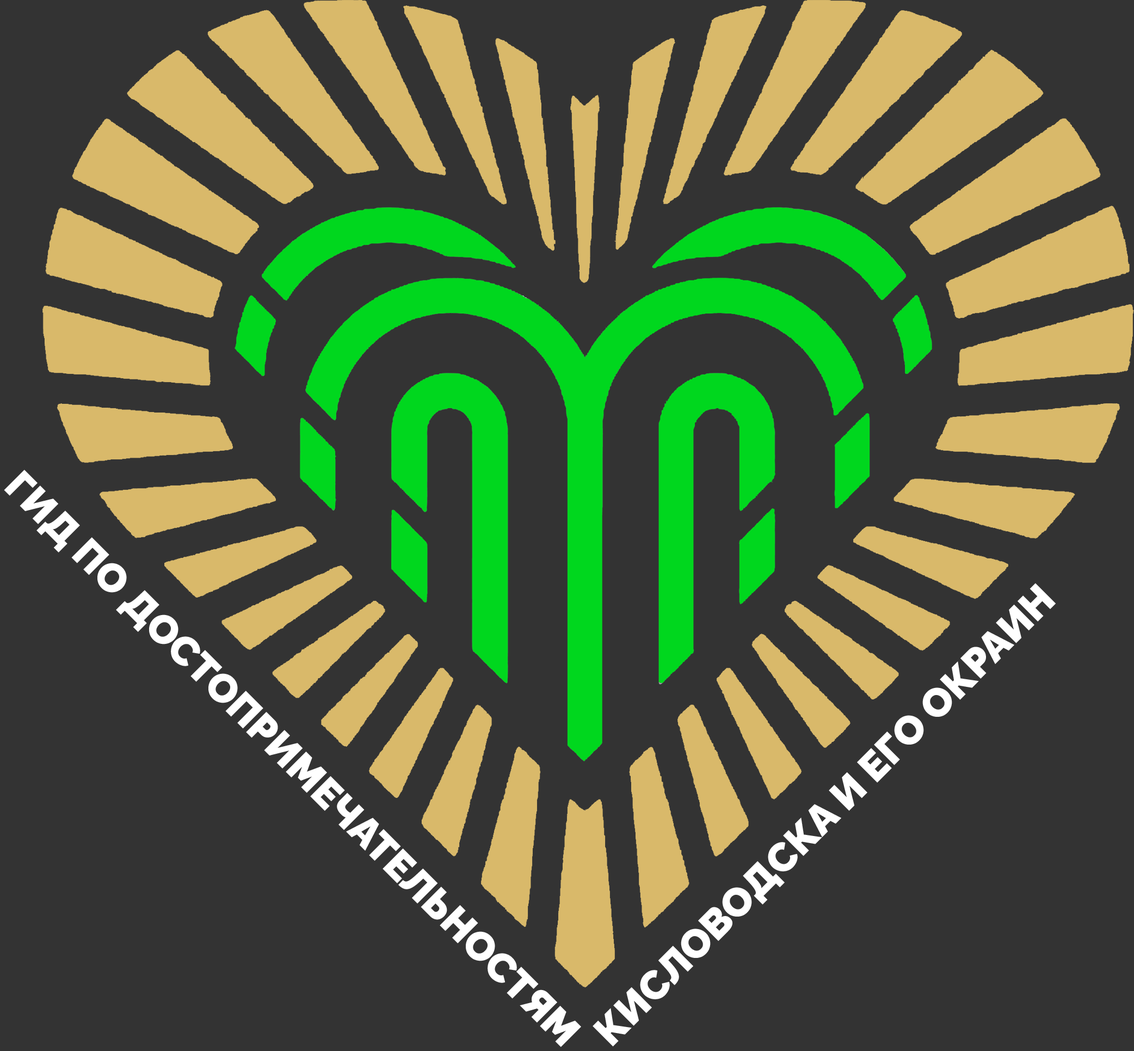
<style>
.page{position:relative;width:1134px;height:1051px;background:#333333}
.page>*{position:absolute;margin:0}
.t1{font:40.3px "Raleway-Black";color:#ffffff}
</style>
<div class="page">
<p class="t1" style="left:4px;top:470px;width:577px;height:577px;rotate:45deg">ГИД ПО ДОСТОПРИМЕЧАТЕЛЬНОСТЯМ</p>
<p class="t1" style="left:593px;top:583px;width:464px;height:464px;rotate:-45deg">КИСЛОВОДСКА И ЕГО ОКРАИН</p>
</div>
